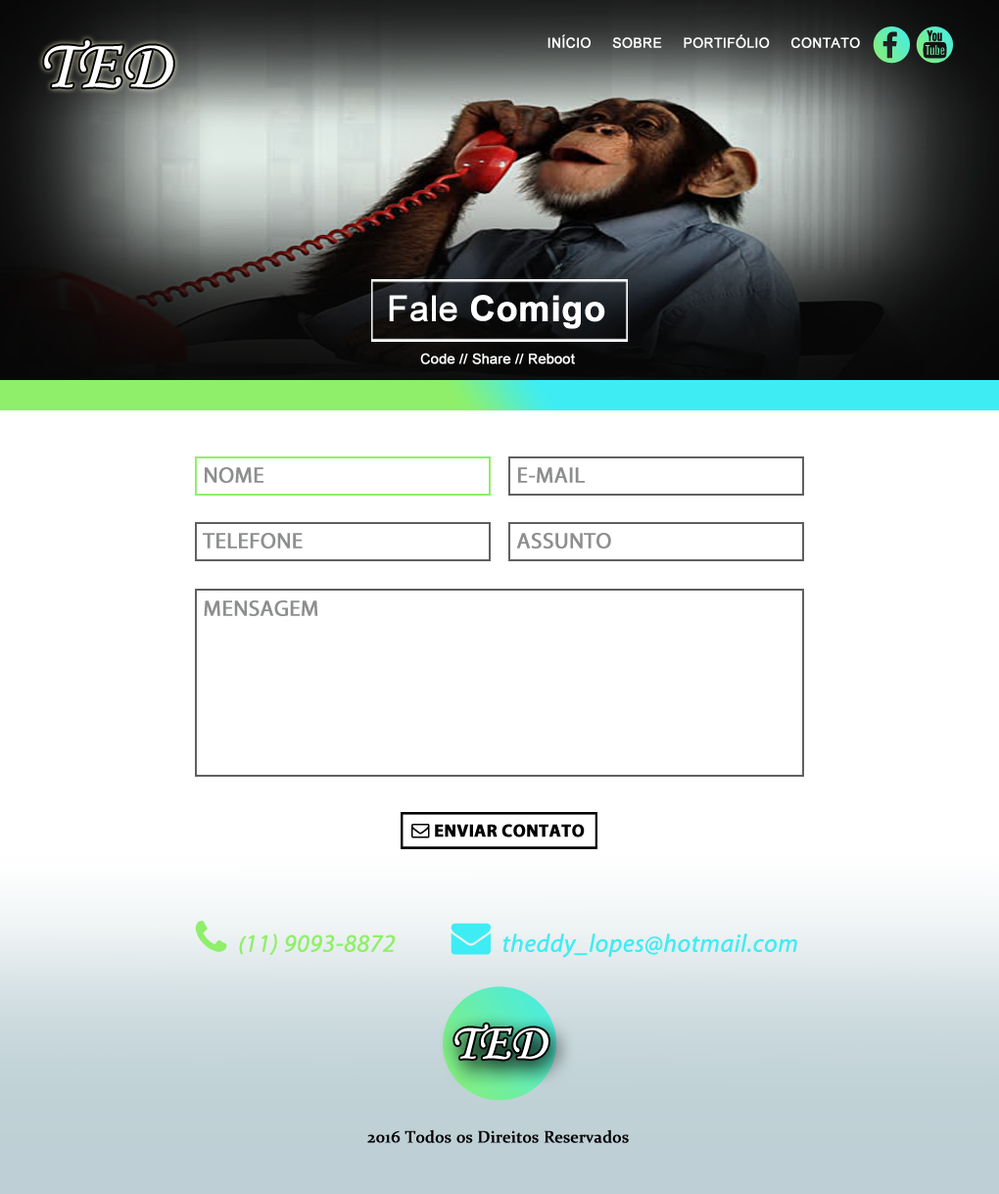
<style>
.page{position:relative;width:999px;height:1194px;background:#ffffff}
.page>*{position:absolute;margin:0}
.t1{font:69.4px "MonotypeCorsiva";color:#ffffff;font-weight:bold}
.t2{font:13.7px "ArialMT";color:#ffffff;font-weight:bold}
.t3{font:35.2px "Arial-BoldMT";color:#ffffff;font-weight:bold}
.t4{font:35.2px "ArialMT";color:#ffffff;font-weight:bold}
.t5{font:13.9px "ArialMT";color:#ffffff;font-weight:bold}
.t6{font:22.2px "MyriadPro-Regular";color:#8d8e8e;font-weight:bold}
.t7{font:50.3px "MonotypeCorsiva";color:#ffffff;font-weight:bold}
.t8{font:16.7px "Constantia";color:#000000;font-weight:bold}
</style>
<div class="page">
<p class="t1" style="left:44px;top:40px;width:129px;height:48px">TED</p>
<p class="t2" style="left:547px;top:34px;width:313px;height:14px">INÍCIO     SOBRE     PORTIFÓLIO     CONTATO</p>
<p class="t3" style="left:389px;top:295px;width:216px;height:34px"><span class="t4">Fale</span> Comigo</p>
<p class="t5" style="left:420px;top:353px;width:155px;height:11px">Code // Share // Reboot</p>
<p class="t6" style="left:205px;top:467px;width:58px;height:16px">NOME</p>
<p class="t6" style="left:518px;top:467px;width:67px;height:16px">E-MAIL</p>
<p class="t6" style="left:203px;top:533px;width:100px;height:15px">TELEFONE</p>
<p class="t6" style="left:516px;top:533px;width:95px;height:15px">ASSUNTO</p>
<p class="t6" style="left:204px;top:600px;width:114px;height:16px">MENSAGEM</p>
<p class="t7" style="left:454px;top:1023px;width:94px;height:37px">TED</p>
<p class="t8" style="left:367px;top:1129px;width:262px;height:14px">2016 Todos os Direitos Reservados</p>
</div>
